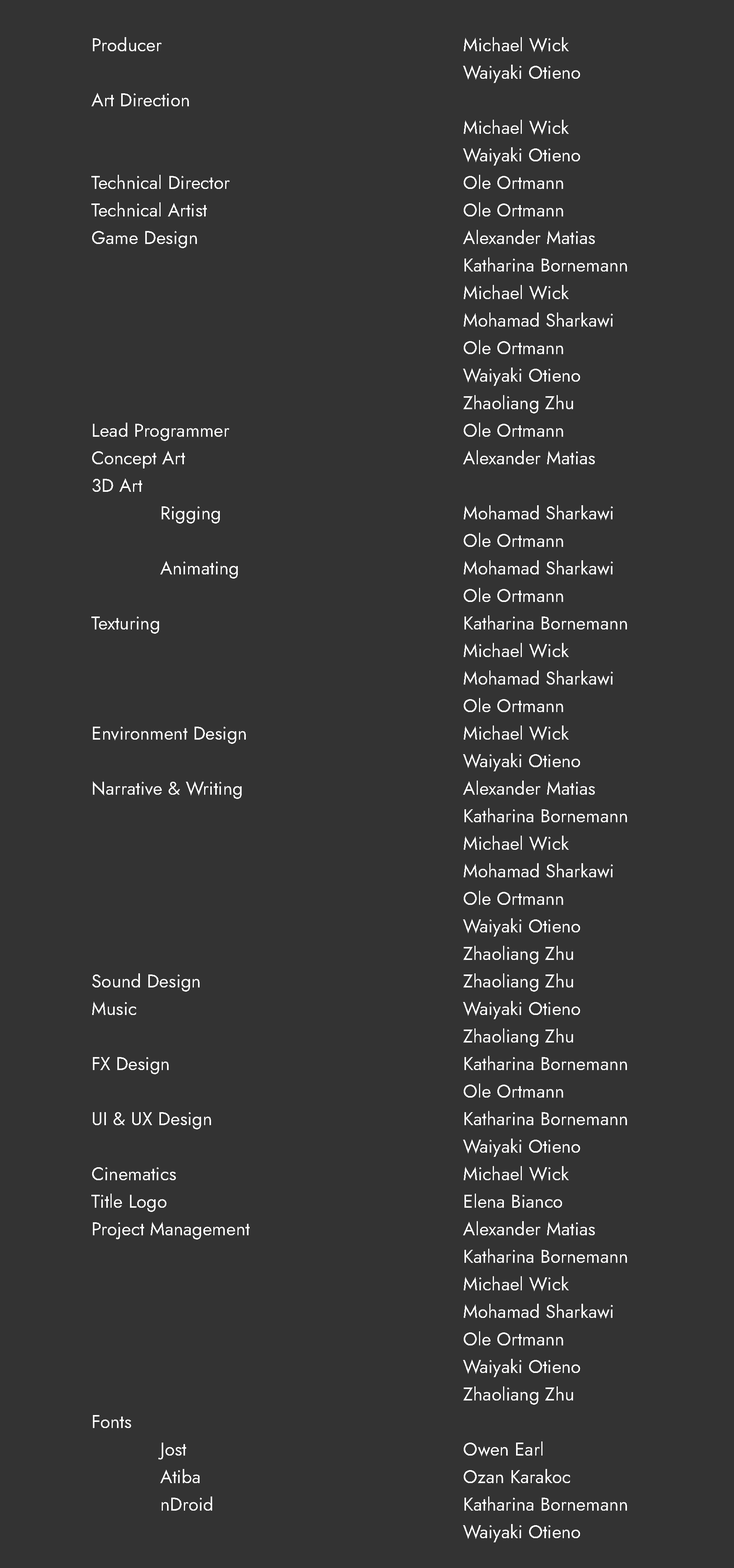
<style>
.page{position:relative;width:734px;height:1568px;background:#333333}
.page>*{position:absolute;margin:0}
.t1{font:18.4px/27.5px "Jost-Book";color:#ffffff}
.t2{font:18.4px/11.5px "Jost-Book";color:#ffffff}
</style>
<div class="page">
<p class="t1" style="left:91px;top:37px;width:536px;height:1505px"><span class="t2">Pr</span>oducer                      Michael Wick<br>                           Waiyaki Otieno<br>Art Direction<br>                           Michael Wick<br>                           Waiyaki Otieno<br>Technical Director                 Ole Ortmann<br>Technical Artist                   Ole Ortmann<br>Game Design                    Alexander Matias<br>                           Katharina Bornemann<br>                           Michael Wick<br>                           Mohamad Sharkawi<br>                           Ole Ortmann<br>                           Waiyaki Otieno<br>                           Zhaoliang Zhu<br>Lead Programmer                 Ole Ortmann<br>Concept Art                     Alexander Matias<br>3D Art<br>     Rigging                  Mohamad Sharkawi<br>                           Ole Ortmann<br>     Animating                 Mohamad Sharkawi<br>                           Ole Ortmann<br>Texturing                       Katharina Bornemann<br>                           Michael Wick<br>                           Mohamad Sharkawi<br>                           Ole Ortmann                      <br>Environment Design                Michael Wick<br>                           Waiyaki Otieno<br>Narrative &amp; Writing                Alexander Matias<br>                           Katharina Bornemann<br>                           Michael Wick<br>                           Mohamad Sharkawi<br>                           Ole Ortmann<br>                           Waiyaki Otieno<br>                           Zhaoliang Zhu<br>Sound Design                    Zhaoliang Zhu<br>Music                        Waiyaki Otieno<br>                           Zhaoliang Zhu<br>FX Design                      Katharina Bornemann<br>                           Ole Ortmann<br>UI &amp; UX Design                   Katharina Bornemann<br>                           Waiyaki Otieno<br>Cinematics                     Michael Wick<br>Title Logo                      Elena Bianco<br>Project Management                Alexander Matias<br>                           Katharina Bornemann<br>                           Michael Wick<br>                           Mohamad Sharkawi<br>                           Ole Ortmann<br>                           Waiyaki Otieno<br>                           Zhaoliang Zhu                   <br>Fonts<br>     Jost                     Owen Earl<br>     Atiba                    Ozan Karakoc<br>     nDroid                   Katharina Bornemann<br>                           Waiyaki Otieno</p>
</div>
